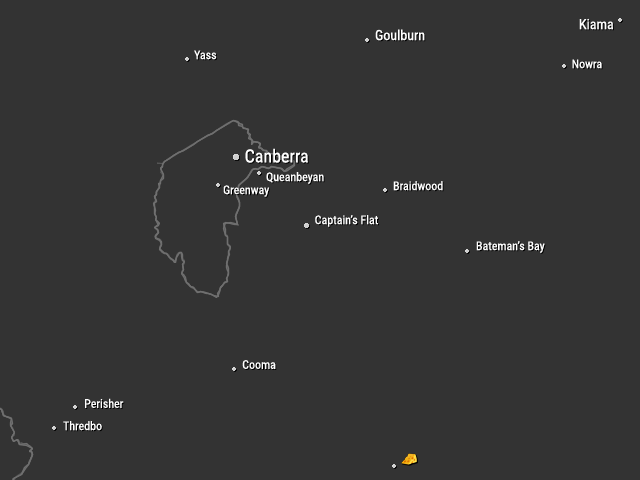
<style>
.page{position:relative;width:640px;height:480px;background:#333333}
.page>*{position:absolute;margin:0}
.t1{font:14px "RobotoCondensed-Regular";color:#ffffff}
.t2{font:12px "RobotoCondensed-Regular";color:#ffffff}
.t3{font:18px "RobotoCondensed-Regular";color:#ffffff}
</style>
<div class="page">
<p class="t1" style="left:375px;top:29px;width:50px;height:12px">Goulburn</p>
<p class="t1" style="left:579px;top:18px;width:34px;height:12px">Kiama</p>
<p class="t2" style="left:194px;top:50px;width:23px;height:10px">Yass</p>
<p class="t2" style="left:572px;top:59px;width:30px;height:10px">Nowra</p>
<p class="t3" style="left:245px;top:148px;width:63px;height:15px">Canberra</p>
<p class="t2" style="left:266px;top:172px;width:58px;height:12px">Queanbeyan</p>
<p class="t2" style="left:223px;top:185px;width:46px;height:12px">Greenway</p>
<p class="t2" style="left:393px;top:181px;width:50px;height:10px">Braidwood</p>
<p class="t2" style="left:315px;top:215px;width:63px;height:12px">Captain’s Flat</p>
<p class="t2" style="left:476px;top:241px;width:69px;height:12px">Bateman’s Bay</p>
<p class="t2" style="left:242px;top:360px;width:34px;height:9px">Cooma</p>
<p class="t2" style="left:85px;top:398px;width:39px;height:10px">Perisher</p>
<p class="t2" style="left:63px;top:421px;width:39px;height:10px">Thredbo</p>
</div>
